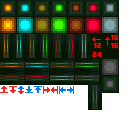
<style>
.page{position:relative;width:128px;height:128px;background:#ffffff}
.page>*{position:absolute;margin:0}
.t1{font:7px "MinecraftTen";letter-spacing:0.05em;color:#ff0000}
</style>
<div class="page">
<p class="t1" style="left:111px;top:34px;width:8px;height:15px;text-align:center">16<br>16</p>
<p class="t1" style="left:92px;top:42px;width:10px;height:16px;text-align:center">12<br>24</p>
</div>
